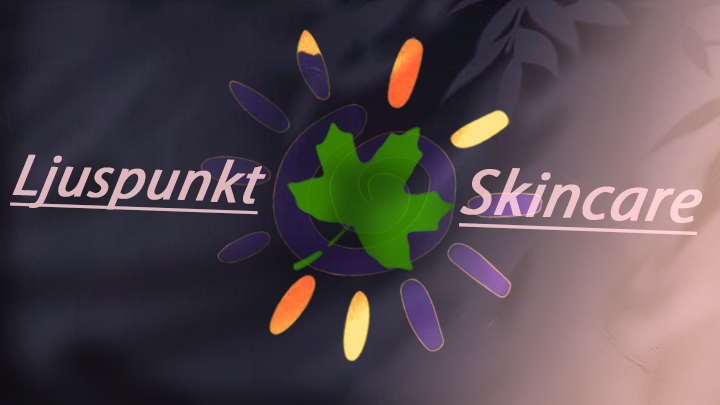
<style>
.page{position:relative;width:720px;height:405px}
.page>*{position:absolute;margin:0}
.t1{font:59.2px "MyriadPro-It";color:#dfb8be;font-weight:bold;font-style:italic;text-decoration:underline}
.t2{font:65.8px "MyriadPro-It";color:#f3c6cc;font-weight:bold;font-style:italic;text-decoration:underline}
</style>
<div class="page">
<p class="t1" style="left:10px;top:154px;width:256px;height:61px;rotate:2deg">Ljuspunkt</p>
<p class="t2" style="left:458px;top:168px;width:245px;height:68px;rotate:2deg">Skincare</p>
</div>
